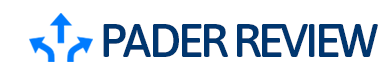
<style>
.page{position:relative;width:384px;height:80px;background:#ffffff}
.page>*{position:absolute;margin:0}
.t1{font:47px "Asap-Symbol";letter-spacing:-0.075em;color:#00366f;text-transform:uppercase}
</style>
<div class="page">
<p class="t1" style="left:103px;top:24px;width:275px;height:33px">pader review</p>
</div>
